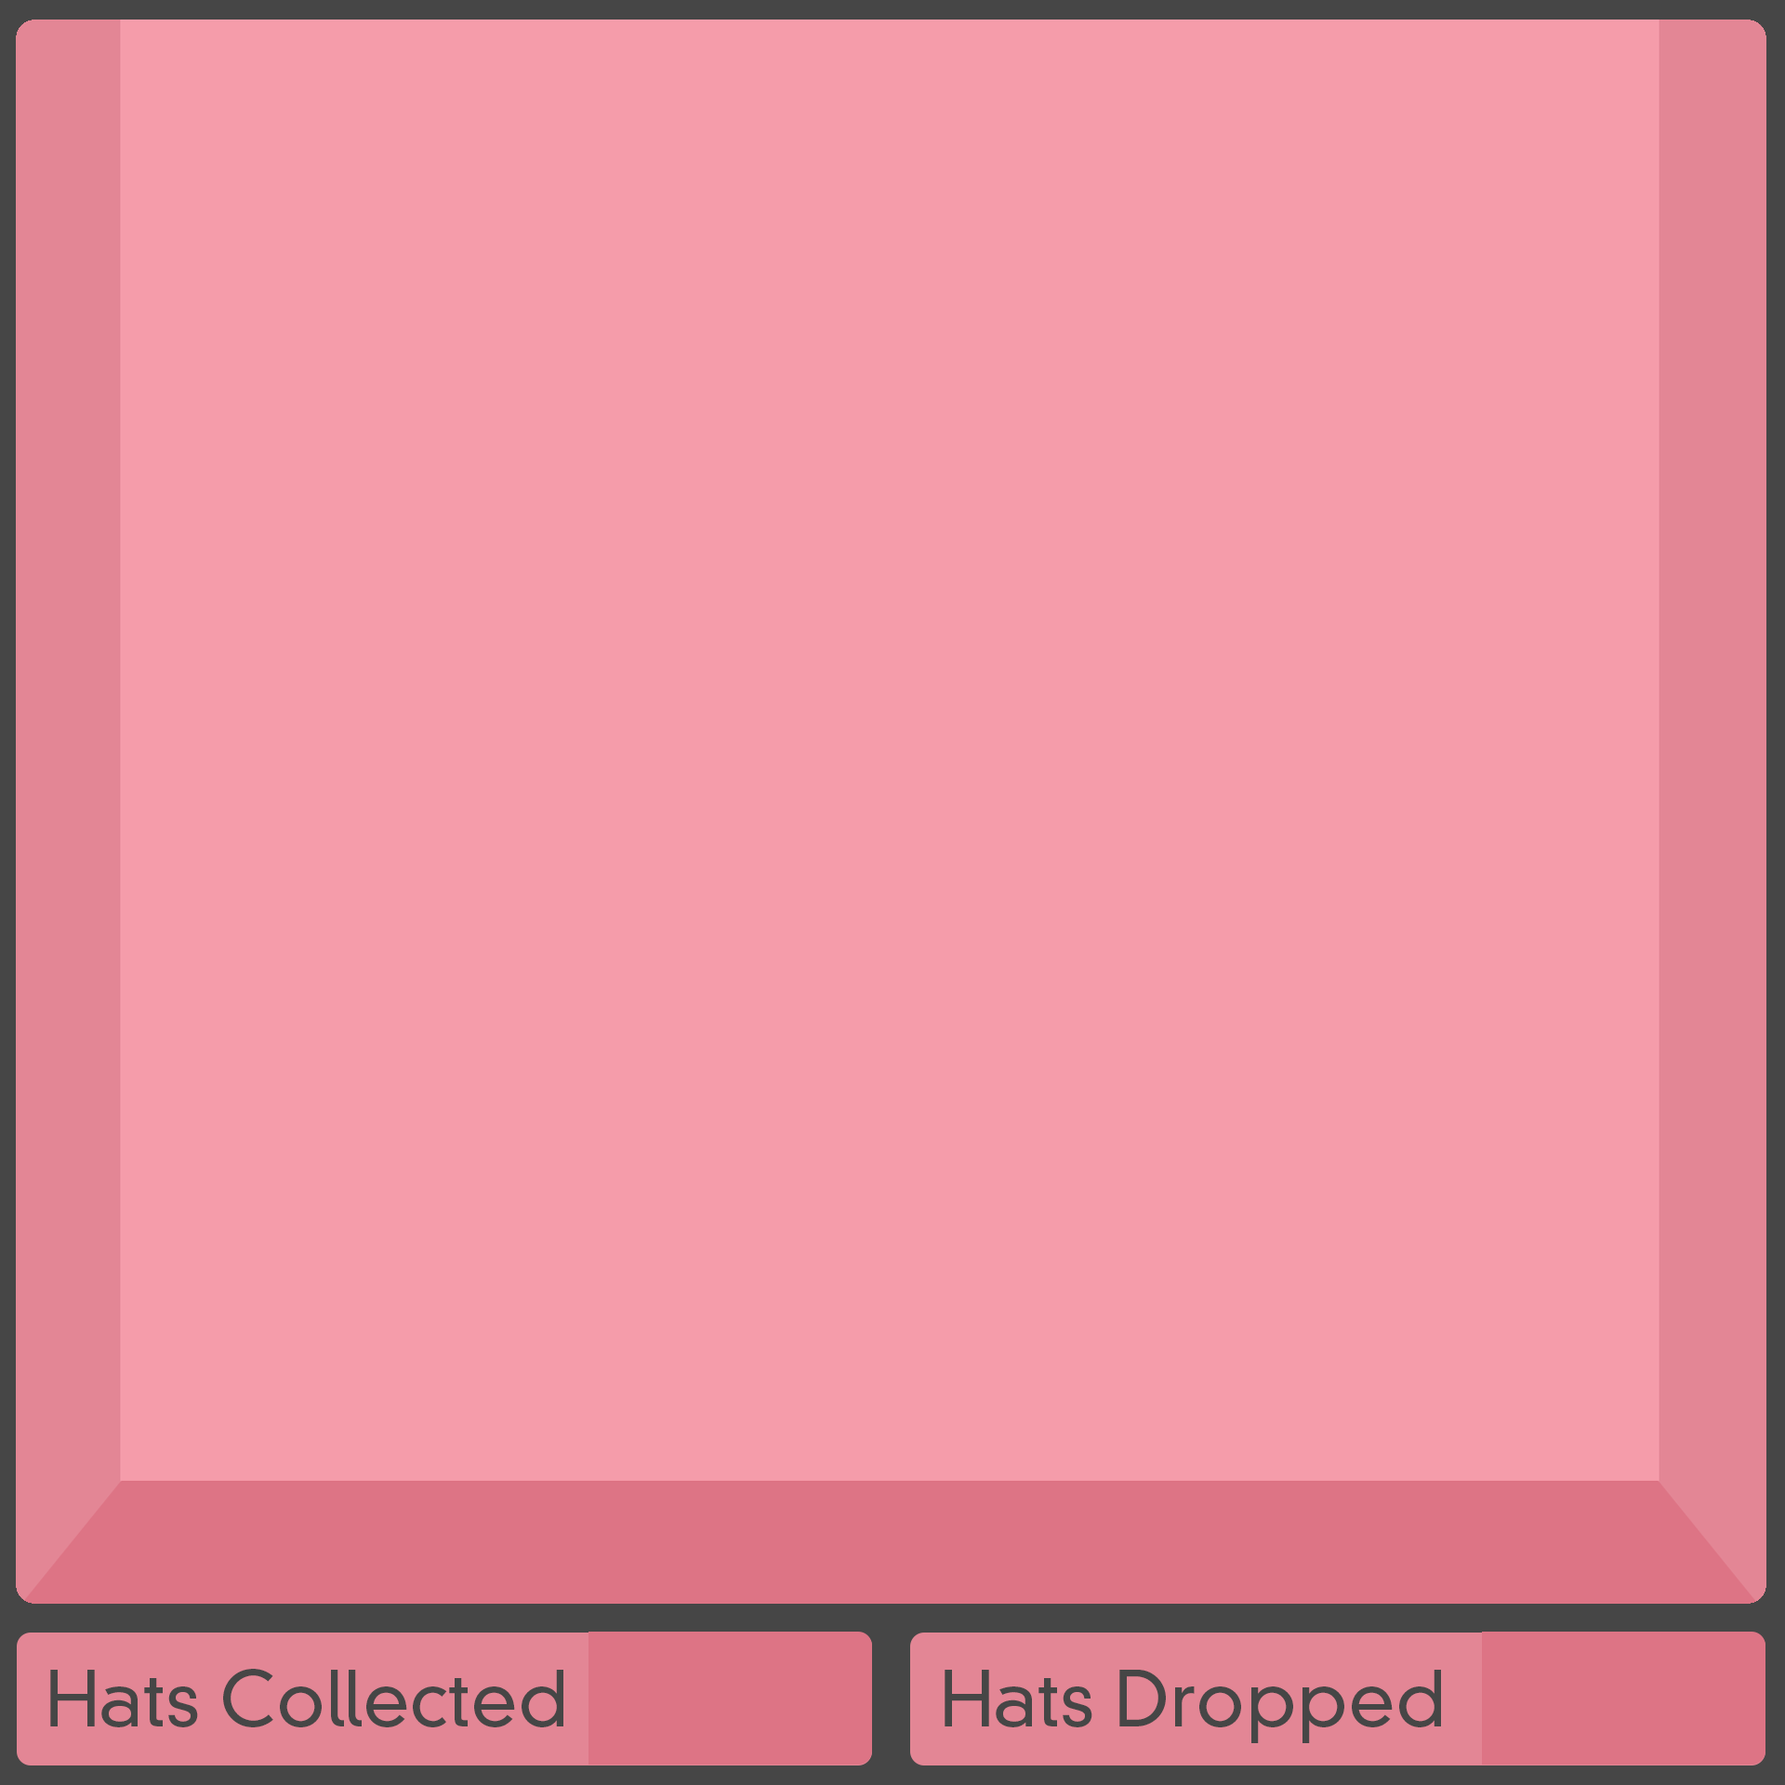
<style>
.page{position:relative;width:1785px;height:1785px;background:#f59caa}
.page>*{position:absolute;margin:0}
.t1{font:9px "DINNeuzeitGroteskStd-Light";color:#464646}
</style>
<div class="page">
<p class="t1" style="left:50px;top:1669px;width:513px;height:59px">Hats Collected</p>
<p class="t1" style="left:945px;top:1670px;width:496px;height:73px">Hats Dropped</p>
</div>
